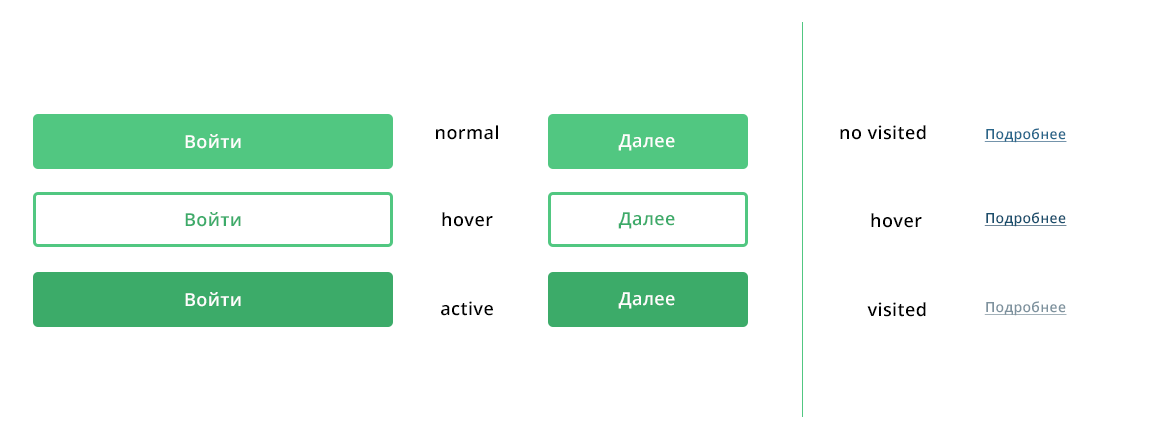
<style>
.page{position:relative;width:1158px;height:437px;background:#ffffff}
.page>*{position:absolute;margin:0}
.t1{font:17.9px "OpenSans-Semibold";letter-spacing:0.025em;color:#000000}
.t2{font:17.9px "OpenSans-Semibold";letter-spacing:0.025em;color:#fefdfd}
.t3{font:13.9px "OpenSans-Semibold";letter-spacing:0.025em;color:#29668a;text-decoration:underline}
.t4{font:17.9px "OpenSans-Semibold";letter-spacing:0.025em;color:#3cab69}
.t5{font:13.9px "OpenSans-Semibold";letter-spacing:0.025em;color:#1b4f6d;text-decoration:underline}
.t6{font:13.9px "OpenSans-Semibold";letter-spacing:0.025em;color:#7e929e;text-decoration:underline}
</style>
<div class="page">
<p class="t1" style="left:436px;top:125px;width:62px;height:191px;text-align:center">normal<br><br><br><br>hover<br><br><br><br>active</p>
<p class="t1" style="left:840px;top:125px;width:86px;height:192px;text-align:right">no visited<br><br><br><br>hover <br><br><br><br>visited</p>
<p class="t2" style="left:185px;top:134px;width:56px;height:15px">Войти</p>
<p class="t2" style="left:618px;top:134px;width:57px;height:17px">Далее</p>
<p class="t3" style="left:984px;top:128px;width:83px;height:15px">Подробнее</p>
<p class="t4" style="left:185px;top:212px;width:56px;height:15px">Войти</p>
<p class="t4" style="left:618px;top:212px;width:57px;height:17px">Далее</p>
<p class="t5" style="left:984px;top:212px;width:83px;height:15px">Подробнее</p>
<p class="t2" style="left:185px;top:292px;width:56px;height:15px">Войти</p>
<p class="t2" style="left:618px;top:292px;width:57px;height:17px">Далее</p>
<p class="t6" style="left:984px;top:301px;width:83px;height:15px">Подробнее</p>
</div>
